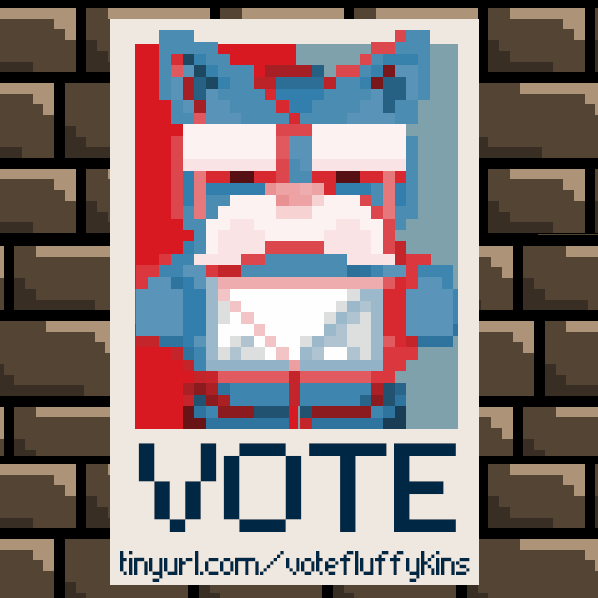
<style>
.page{position:relative;width:598px;height:598px;background:#544433}
.page>*{position:absolute;margin:0}
.t1{font:164.7px "Pixelade";letter-spacing:-0.04em;color:#002744;scale:1.22 1}
.t2{font:44.5px "Pixelade";letter-spacing:-0.04em;color:#002744}
</style>
<div class="page">
<p class="t1" style="left:138px;top:443px;width:318px;height:89px">VOTE</p>
<p class="t2" style="left:120px;top:551px;width:350px;height:31px">tinyurl.com/votefluffykins</p>
</div>
